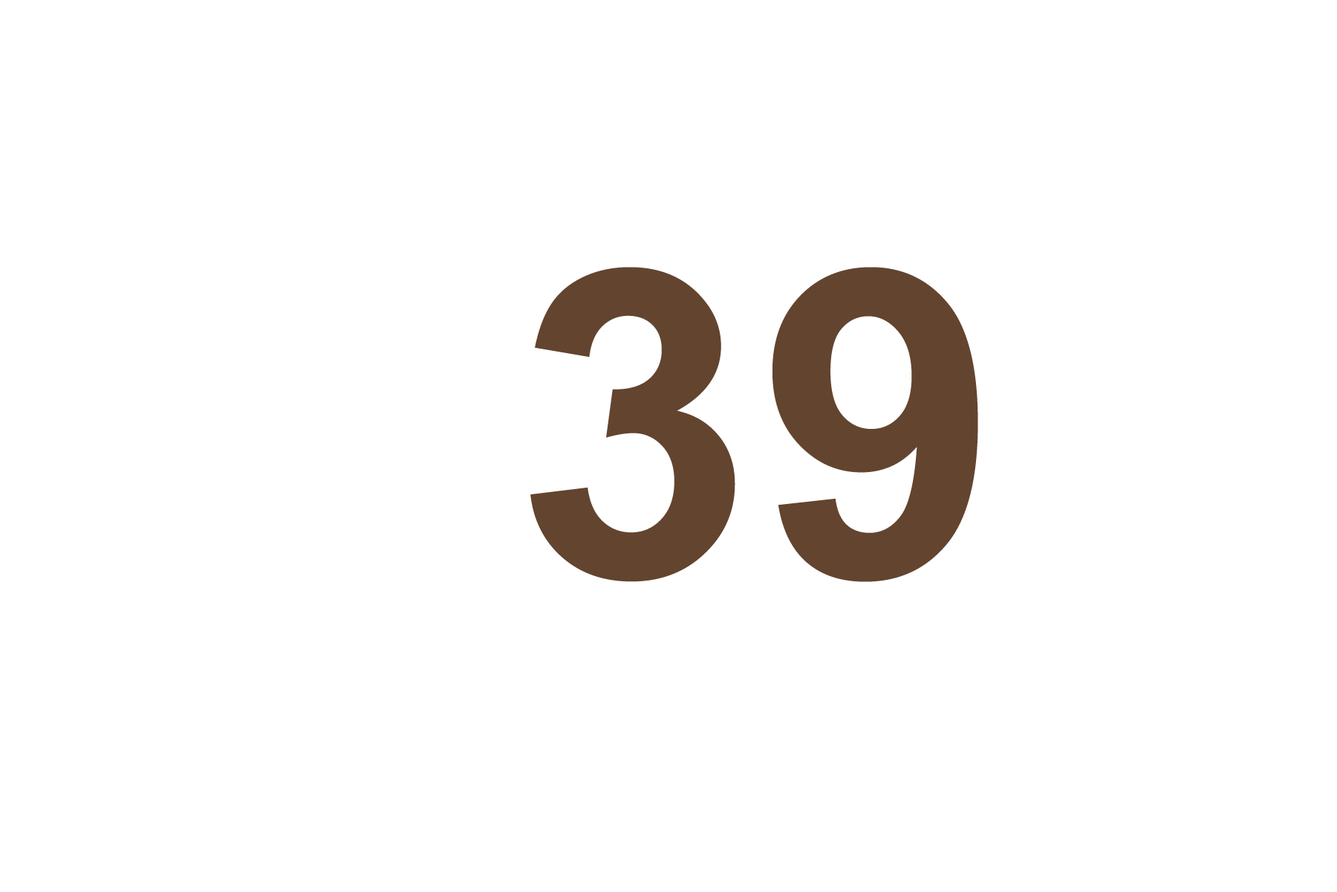
<style>
.page{position:relative;width:1337px;height:892px;background:#ffffff}
.page>*{position:absolute;margin:0}
.t1{font:429.6px "Arial-BoldMT";color:#63442f}
</style>
<div class="page">
<p class="t1" style="left:531px;top:267px;width:448px;height:315px">39</p>
</div>
